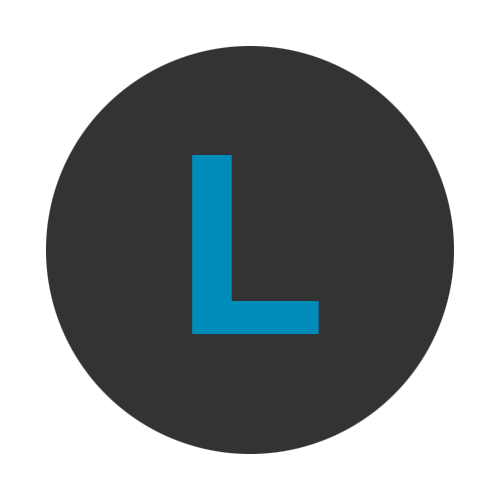
<style>
.page{position:relative;width:500px;height:500px;background:#333333}
.page>*{position:absolute;margin:0}
.t1{font:250px "HelveticaNeue-Bold";color:#008cba}
</style>
<div class="page">
<p class="t1" style="left:192px;top:155px;width:127px;height:179px">L</p>
</div>
